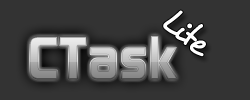
<style>
.page{position:relative;width:250px;height:100px;background:#333333}
.page>*{position:absolute;margin:0}
.t1{font:36px "Desyrel";color:#ffffff}
.t2{font:60px "ContinuumBold"}
</style>
<div class="page">
<p class="t1" style="left:163px;top:10px;width:43px;height:47px;rotate:40deg">Lite</p>
<p class="t2" style="left:29px;top:35px;width:149px;height:44px">CTask</p>
<p class="t2" style="left:29px;top:35px;width:149px;height:44px">CTask</p>
</div>
